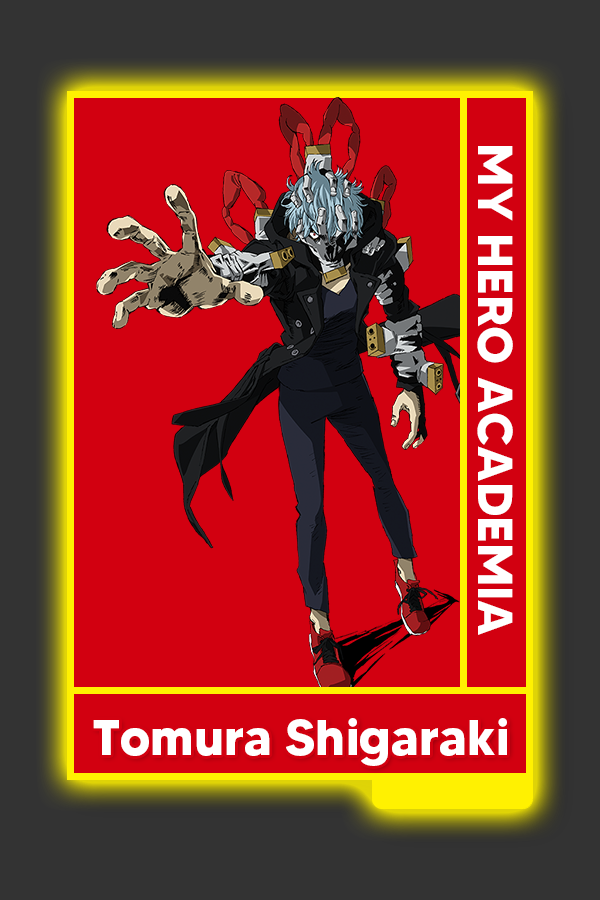
<style>
.page{position:relative;width:600px;height:900px;background:#d20010}
.page>*{position:absolute;margin:0}
.t1{font:48.8px "MADETOMMY-Bold";color:#ffffff}
.t2{font:50.5px "MADETOMMY-Bold";color:#ffffff}
</style>
<div class="page">
<p class="t1" style="left:477px;top:146px;width:36px;height:489px;rotate:90deg">MY HERO ACADEMIA</p>
<p class="t2" style="left:93px;top:718px;width:414px;height:48px">Tomura Shigaraki</p>
</div>
